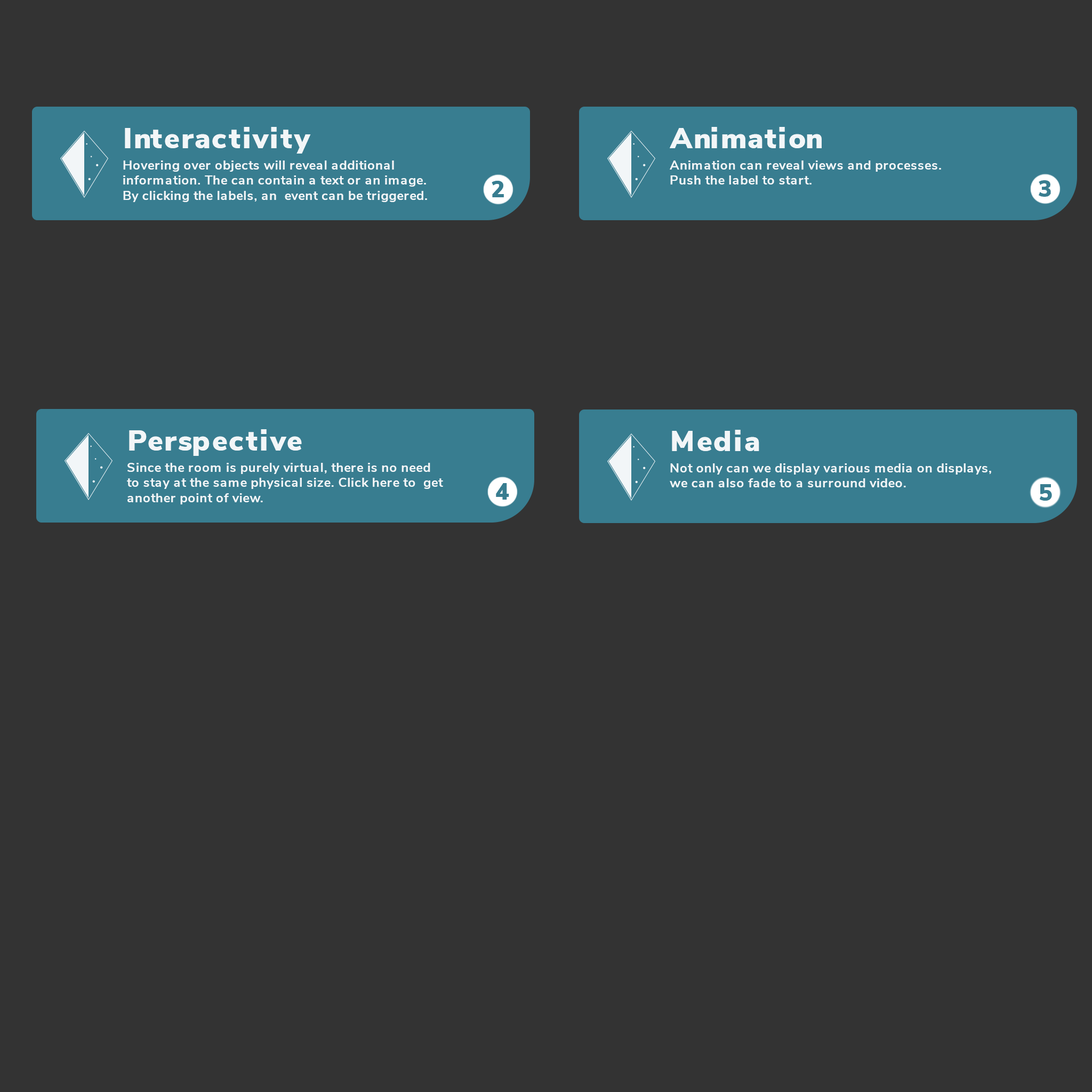
<style>
.page{position:relative;width:1092px;height:1092px;background:#333333}
.page>*{position:absolute;margin:0}
.t1{font:28.8px "NunitoSans-Black";letter-spacing:0.03em;color:#f2f6f8}
.t2{font:12.8px/15.2px "NunitoSans-Bold";letter-spacing:0.03em;color:#f2f6f8}
</style>
<div class="page">
<p class="t1" style="left:125px;top:127px;width:186px;height:27px">Interactivity</p>
<p class="t1" style="left:670px;top:127px;width:152px;height:21px">Animation</p>
<p class="t2" style="left:123px;top:160px;width:304px;height:42px">Hovering over objects will reveal additional<br>information. The can contain a text or an image.<br>By clicking the labels, an  event can be triggered.</p>
<p class="t2" style="left:670px;top:160px;width:271px;height:24px">Animation can reveal views and processes.<br>Push the label to start.</p>
<p class="t1" style="left:129px;top:429px;width:173px;height:27px">Perspective</p>
<p class="t1" style="left:672px;top:430px;width:87px;height:21px">Media</p>
<p class="t2" style="left:127px;top:463px;width:316px;height:41px">Since the room is purely virtual, there is no need<br>to stay at the same physical size. Click here to  get<br>another point of view.</p>
<p class="t2" style="left:670px;top:463px;width:321px;height:24px">Not only can we display various media on displays,<br>we can also fade to a surround video.</p>
</div>
